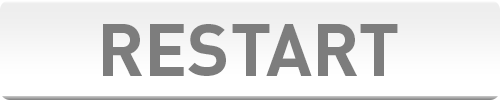
<style>
.page{position:relative;width:500px;height:100px;background:#ffffff}
.page>*{position:absolute;margin:0}
.t1{font:72px "DINPro-Bold";color:#7d7d7d}
</style>
<div class="page">
<p class="t1" style="left:103px;top:24px;width:295px;height:52px">RESTART</p>
</div>
